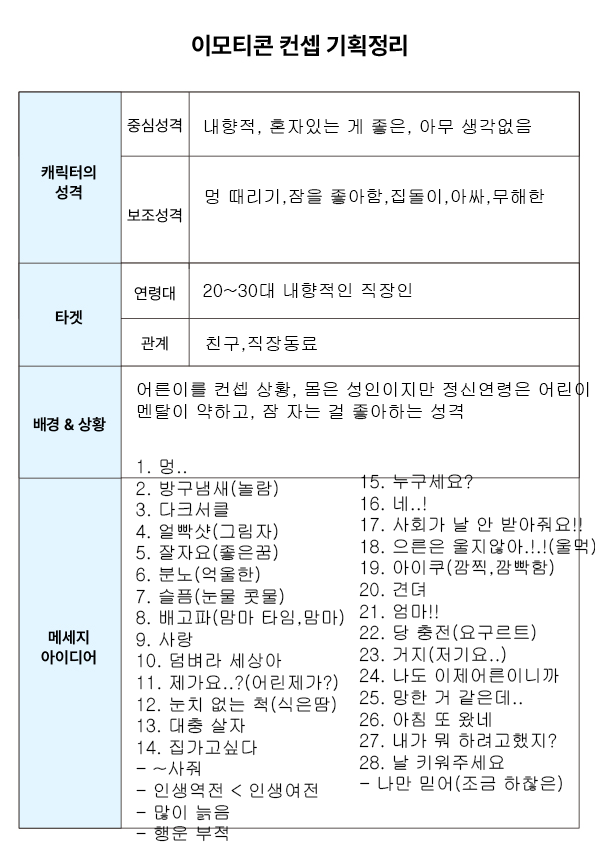
<style>
.page{position:relative;width:595px;height:842px;background:#ffffff}
.page>*{position:absolute;margin:0}
.t1{font:18px "Gulim";color:#000000}
</style>
<div class="page">
<p class="t1" style="left:204px;top:119px;width:327px;height:16px">내향적, 혼자있는 게 좋은, 아무 생각없음</p>
<p class="t1" style="left:205px;top:189px;width:340px;height:16px">멍 때리기,잠을 좋아함,집돌이,아싸,무해한</p>
<p class="t1" style="left:203px;top:283px;width:209px;height:15px">20~30대 내향적인 직장인</p>
<p class="t1" style="left:206px;top:336px;width:111px;height:16px">친구,직장동료</p>
<p class="t1" style="left:137px;top:382px;width:452px;height:38px">어른이를 컨셉 상황, 몸은 성인이지만 정신연령은 어린이<br>멘탈이 약하고, 잠 자는 걸 좋아하는 성격</p>
<p class="t1" style="left:136px;top:459px;width:208px;height:383px">1. 멍.. <br>2. 방구냄새(놀람)<br>3. 다크서클<br>4. 얼빡샷(그림자)<br>5. 잘자요(좋은꿈)<br>6. 분노(억울한)<br>7. 슬픔(눈물 콧물)<br>8. 배고파(맘마 타임,맘마)<br>9. 사랑<br>10. 덤벼라 세상아<br>11. 제가요..?(어린제가?)<br>12. 눈치 없는 척(식은땀)<br>13. 대충 살자<br>14. 집가고싶다<br>- ~사줘<br>- 인생역전 &lt; 인생여전<br>- 많이 늙음<br>- 행운 부적</p>
<p class="t1" style="left:359px;top:474px;width:237px;height:318px">15. 누구세요?<br>16. 네..!<br>17. 사회가 날 안 받아줘요!!<br>18. 으른은 울지않아.!.!(울먹)<br>19. 아이쿠(깜찍,깜빡함)<br>20. 견뎌<br>21. 엄마!!<br>22. 당 충전(요구르트)<br>23. 거지(저기요..)<br>24. 나도 이제어른이니까<br>25. 망한 거 같은데..<br>26. 아침 또 왔네<br>27. 내가 뭐 하려고했지?<br>28. 날 키워주세요<br>- 나만 믿어(조금 하찮은)</p>
</div>
